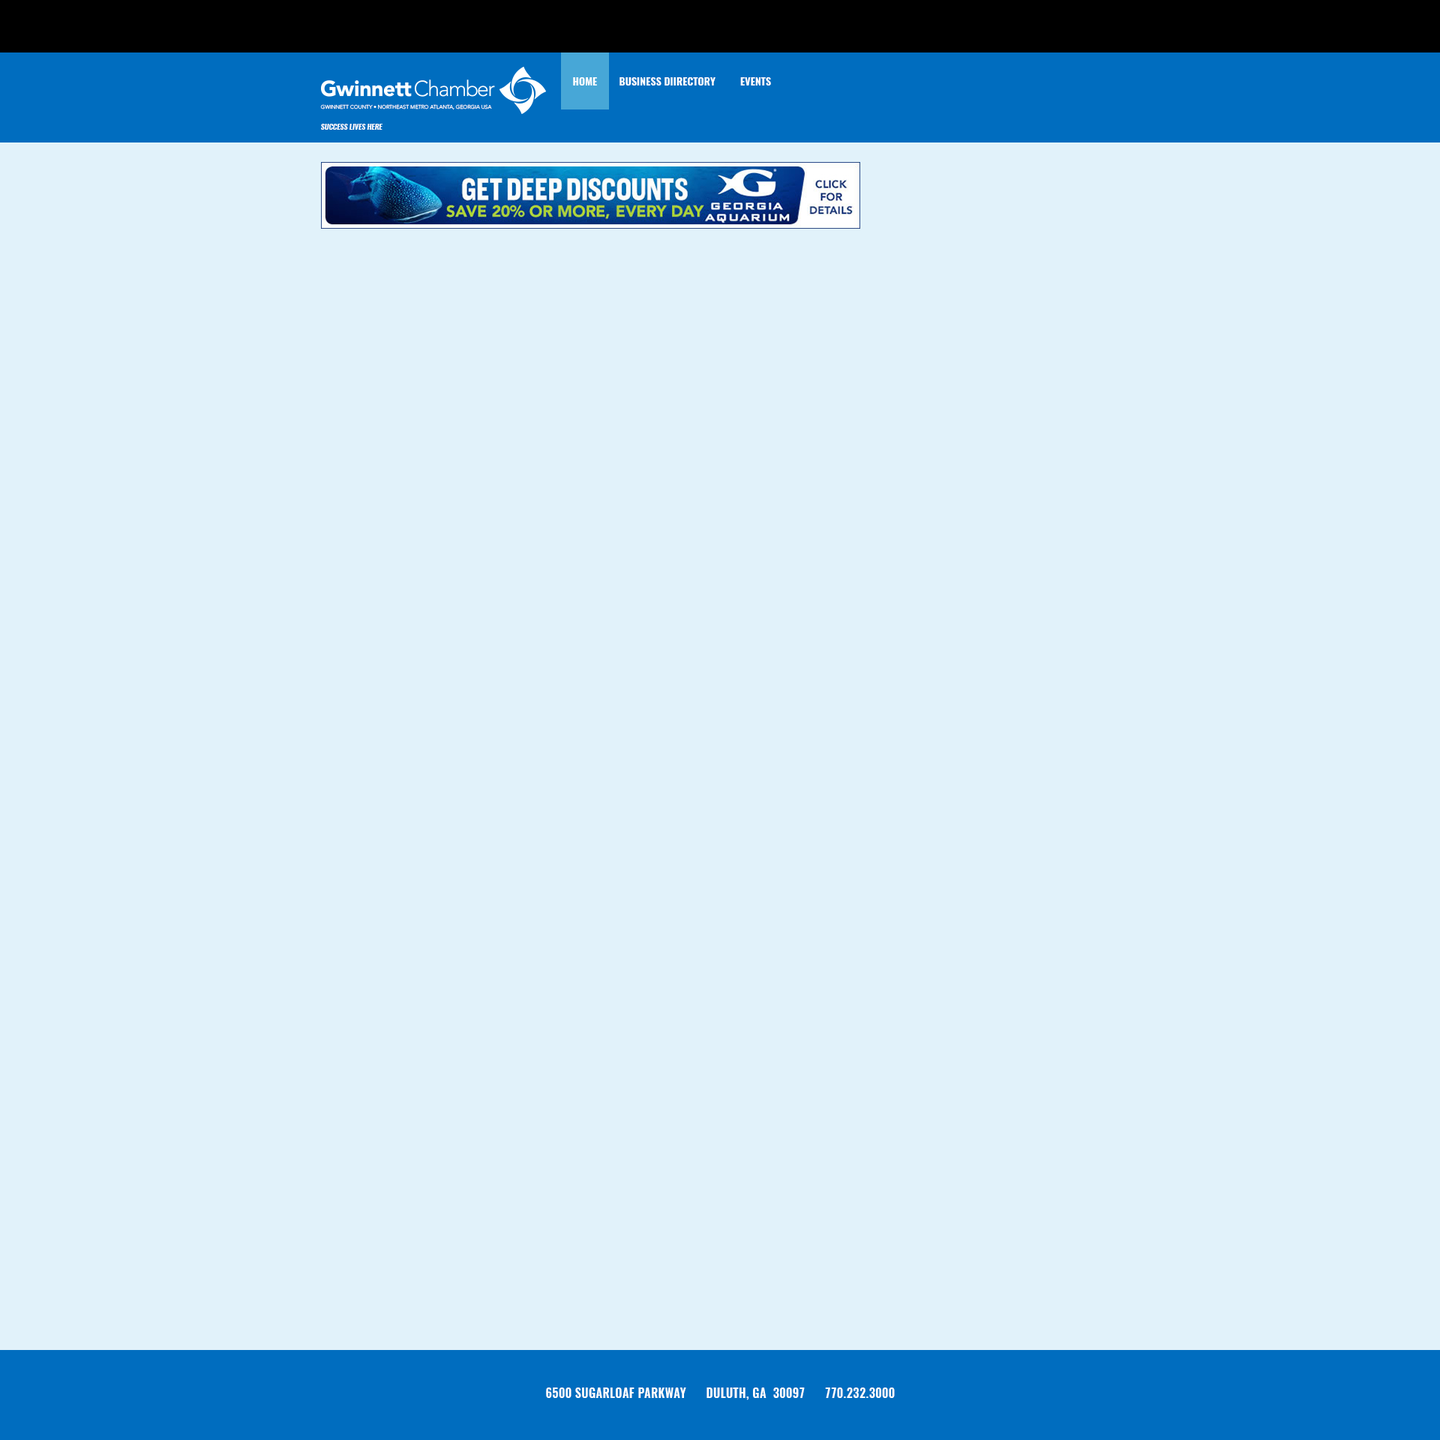
<style>
.page{position:relative;width:1440px;height:1440px;background:#e1f2fa}
.page>*{position:absolute;margin:0}
.t1{font:10.5px "Oswald-DemiBold";letter-spacing:0.01em;color:#ffffff}
.t2{font:5.2px "Avenir-Medium";letter-spacing:-0.005em;color:#ffffff}
.t3{font:7.5px "Oswald-Demi-BoldItalic";letter-spacing:-0.005em;color:#ffffff}
.t4{font:12px "Oswald-DemiBold";letter-spacing:0.025em;color:#ffffff}
</style>
<div class="page">
<p class="t1" style="left:573px;top:77px;width:198px;height:9px">HOME        BUSINESS DIIRECTORY         EVENTS</p>
<p class="t2" style="left:320px;top:104px;width:172px;height:6px">GWINNETT COUNTY • NORTHEAST METRO ATLANTA, GEORGIA USA</p>
<p class="t3" style="left:321px;top:124px;width:61px;height:6px">SUCCESS LIVES HERE</p>
<p class="t4" style="left:546px;top:1388px;width:349px;height:12px">6500 SUGARLOAF PARKWAY      DULUTH, GA  30097      770.232.3000</p>
</div>
